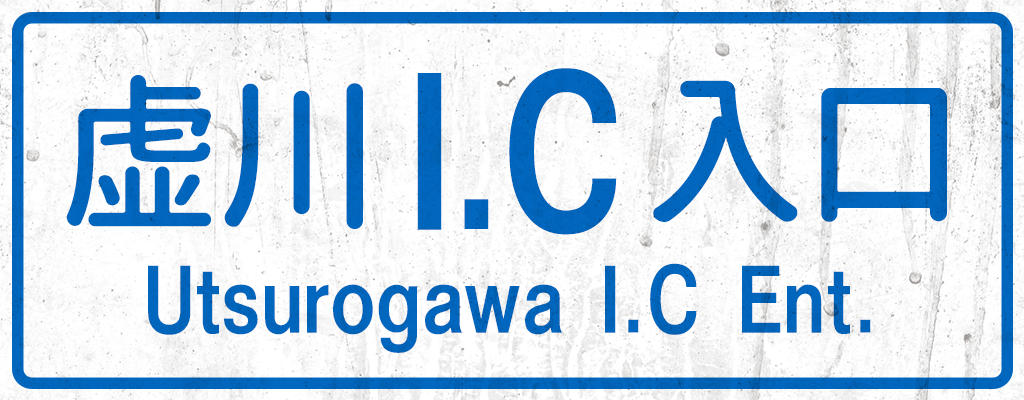
<style>
.page{position:relative;width:1024px;height:400px}
.page>*{position:absolute;margin:0}
.t1{font:168px "GD-HighwayGothicJA-OTF";letter-spacing:-0.04em;color:#0167bf}
.t2{font:168px "GenJyuuGothic-Medium";letter-spacing:-0.04em;color:#0167bf}
.t3{font:72px "GD-HighwayGothicJA-OTF";color:#0167bf}
</style>
<div class="page">
<p class="t1" style="left:66px;top:68px;width:881px;height:167px"><span class="t2">虚川 </span>I.C <span class="t2">入口</span></p>
<p class="t3" style="left:148px;top:263px;width:723px;height:90px">Utsurogawa I.C Ent.</p>
</div>
